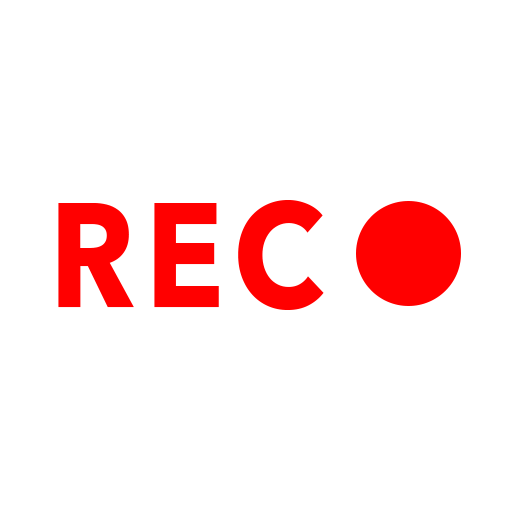
<style>
.page{position:relative;width:512px;height:512px;background:#ffffff}
.page>*{position:absolute;margin:0}
.t1{font:147.3px "AvenirNext-Bold";letter-spacing:0.075em;color:#ff0000;scale:0.88 1}
</style>
<div class="page">
<p class="t1" style="left:58px;top:200px;width:266px;height:110px">REC</p>
</div>
